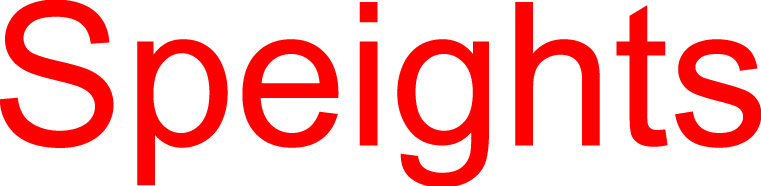
<style>
.page{position:relative;width:761px;height:186px;background:#ffffff}
.page>*{position:absolute;margin:0}
.t1{font:200.1px "ArialMT";color:#ff0000}
</style>
<div class="page">
<p class="t1" style="left:0px;top:0px;width:762px;height:188px">Speights</p>
</div>
